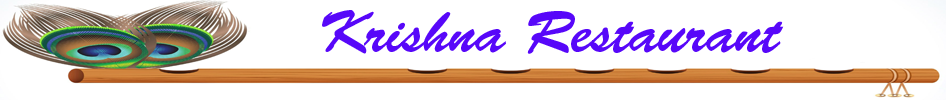
<style>
.page{position:relative;width:946px;height:100px;background:#ffffff}
.page>*{position:absolute;margin:0}
.t1{font:58.3px "BrushScriptStd";color:#5707f9}
</style>
<div class="page">
<p class="t1" style="left:322px;top:10px;width:462px;height:44px">Krishna Restaurant</p>
</div>
